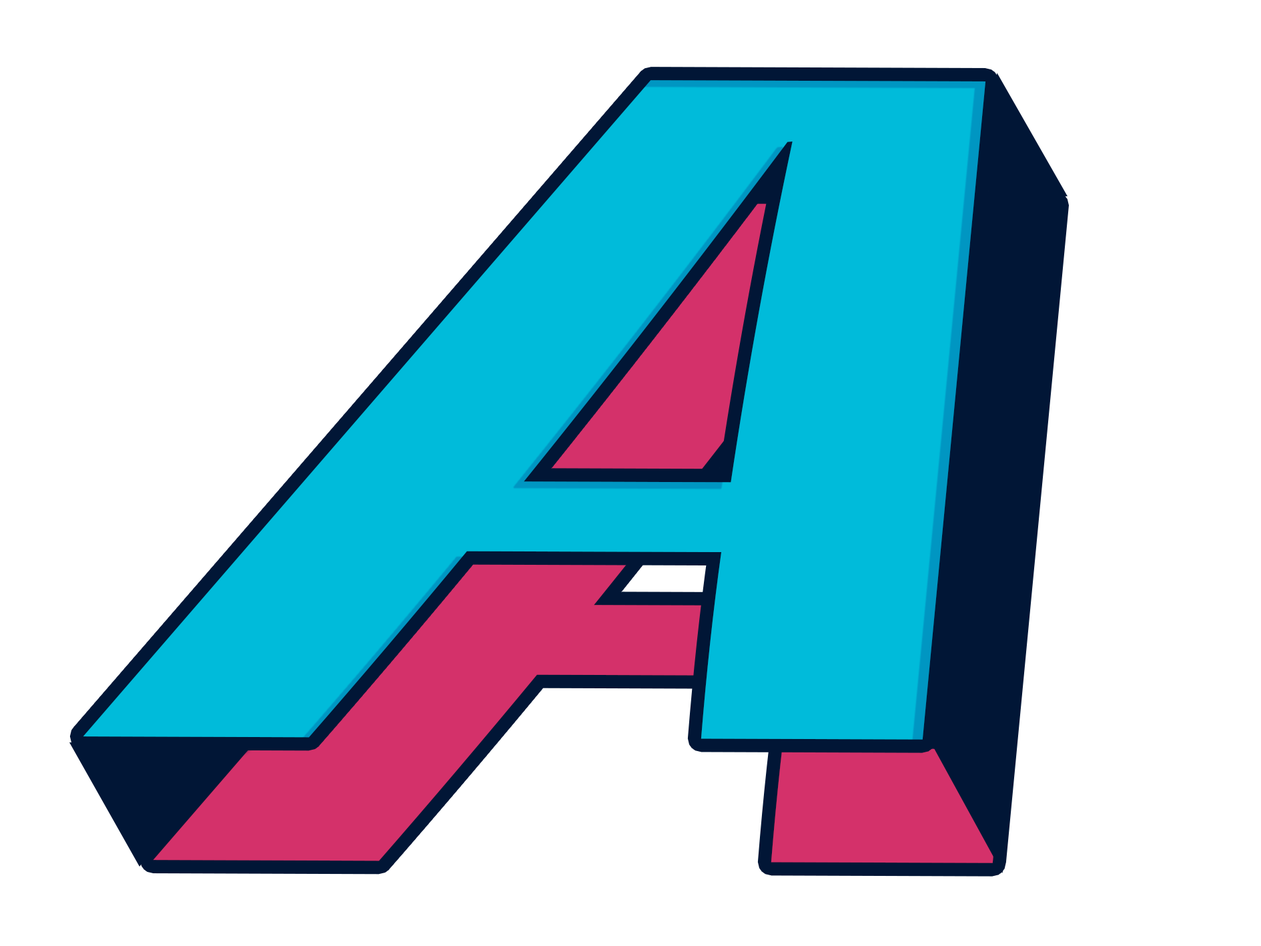
<style>
.page{position:relative;width:1261px;height:946px;background:#ffffff}
.page>*{position:absolute;margin:0}
.t1{font:1041.8px "StingerFitTrial-Bold";color:#00bbda;scale:1.05 1}
.t2{font:1041.8px "StingerFitTrial-Bold";scale:1.05 1}
</style>
<div class="page">
<p class="t1" style="left:83px;top:80px;width:903px;height:659px">A</p>
<p class="t2" style="left:153px;top:204px;width:903px;height:659px">A</p>
</div>
